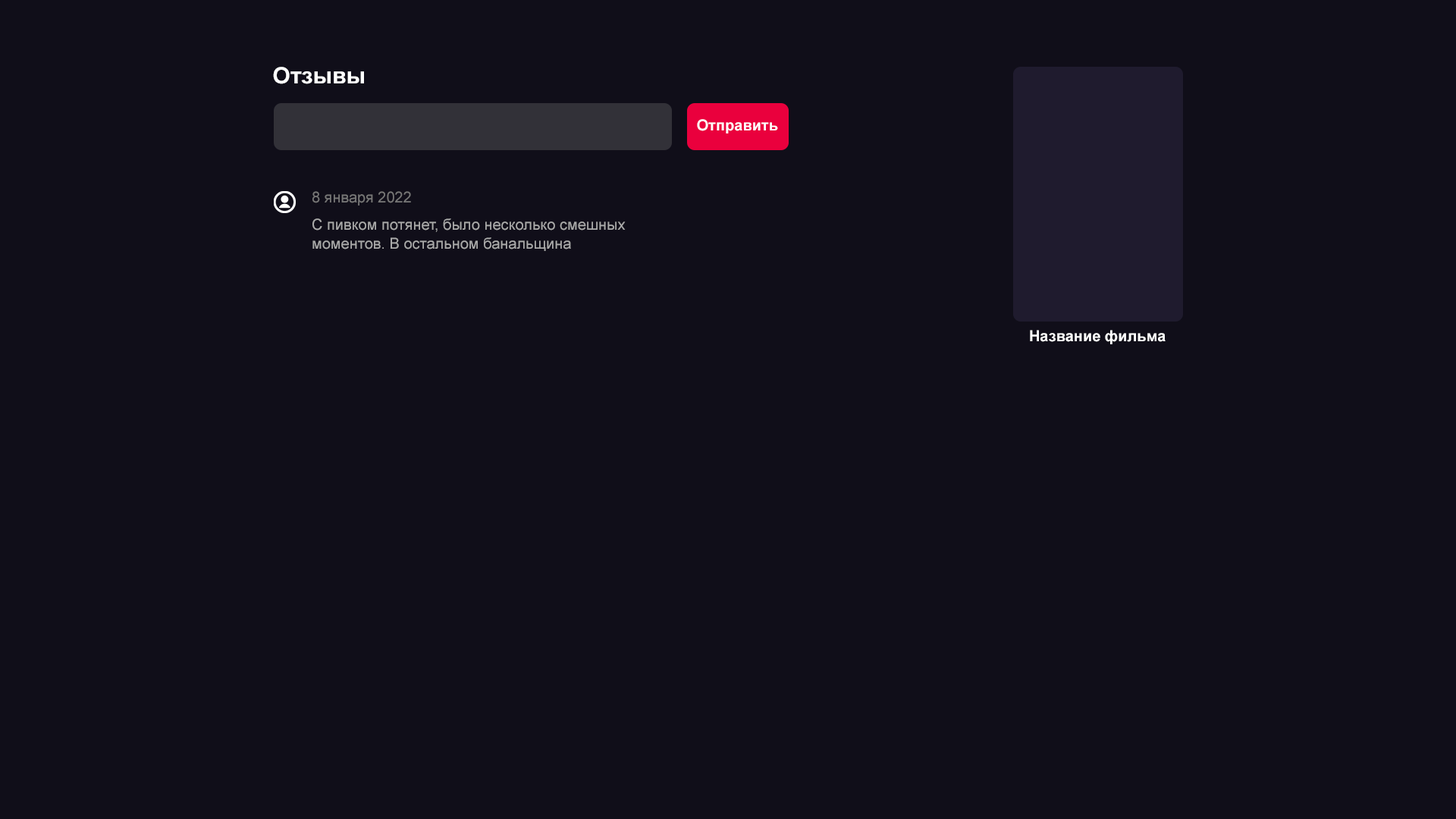
<style>
.page{position:relative;width:1456px;height:819px;background:#100e19}
.page>*{position:absolute;margin:0}
.t1{font:22.7px "Arial-BoldMT";color:#ffffff}
.t2{font:15.2px "Arial-BoldMT";color:#ffffff}
.t3{font:15.2px "ArialMT";color:#777777}
.t4{font:15.2px/19px "ArialMT";color:#aaaaaa}
</style>
<div class="page">
<p class="t1" style="left:273px;top:67px;width:91px;height:17px">Отзывы</p>
<p class="t2" style="left:697px;top:119px;width:81px;height:14px">Отправить</p>
<p class="t3" style="left:312px;top:191px;width:99px;height:15px">8 января 2022</p>
<p class="t4" style="left:312px;top:218px;width:314px;height:33px">С пивком потянет, было несколько смешных моментов. В остальном банальщина</p>
<p class="t2" style="left:1030px;top:330px;width:136px;height:14px">Название фильма</p>
</div>
